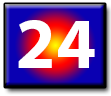
<style>
.page{position:relative;width:111px;height:96px;background:#ffffff}
.page>*{position:absolute;margin:0}
.t1{font:72px "MyriadPro-Bold";color:#ffffff}
</style>
<div class="page">
<p class="t1" style="left:18px;top:20px;width:77px;height:48px">24</p>
</div>
